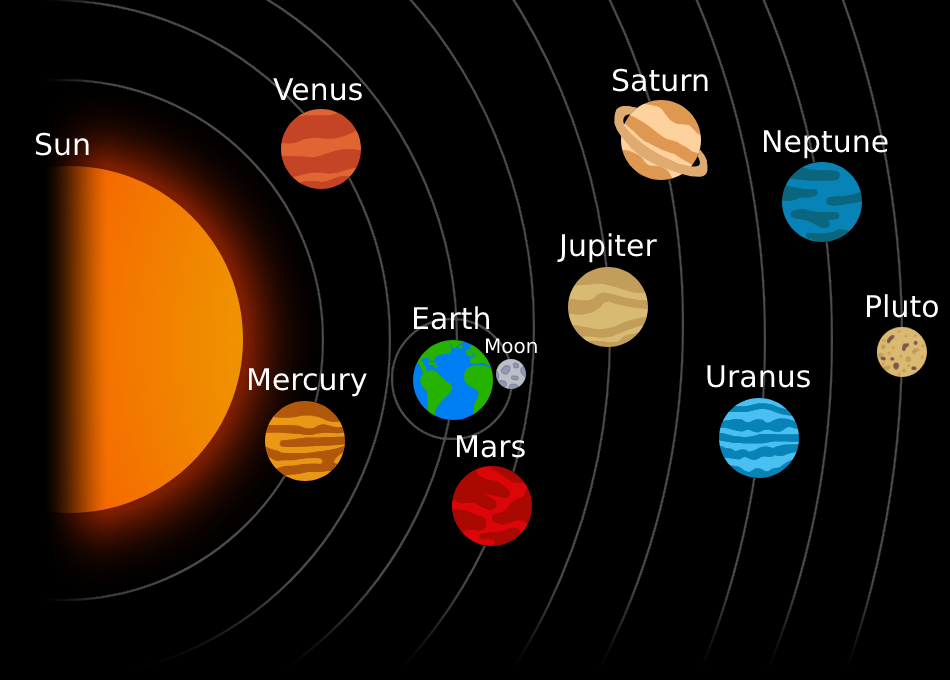
<style>
.page{position:relative;width:950px;height:680px;background:#000000}
.page>*{position:absolute;margin:0}
.t1{font:30px "DejaVuSans";color:#ffffff}
.t2{font:20px "DejaVuSans";color:#ffffff}
</style>
<div class="page">
<p class="t1" style="left:273px;top:78px;width:89px;height:23px">Venus</p>
<p class="t1" style="left:612px;top:68px;width:96px;height:24px">Saturn</p>
<p class="t1" style="left:35px;top:132px;width:54px;height:24px">Sun</p>
<p class="t1" style="left:763px;top:130px;width:125px;height:29px">Neptune</p>
<p class="t1" style="left:557px;top:233px;width:100px;height:30px">Jupiter</p>
<p class="t1" style="left:866px;top:294px;width:72px;height:24px">Pluto</p>
<p class="t1" style="left:413px;top:306px;width:76px;height:24px">Earth</p>
<p class="t2" style="left:485px;top:338px;width:52px;height:16px">Moon</p>
<p class="t1" style="left:707px;top:365px;width:103px;height:23px">Uranus</p>
<p class="t1" style="left:248px;top:368px;width:119px;height:29px">Mercury</p>
<p class="t1" style="left:456px;top:435px;width:69px;height:23px">Mars</p>
</div>
